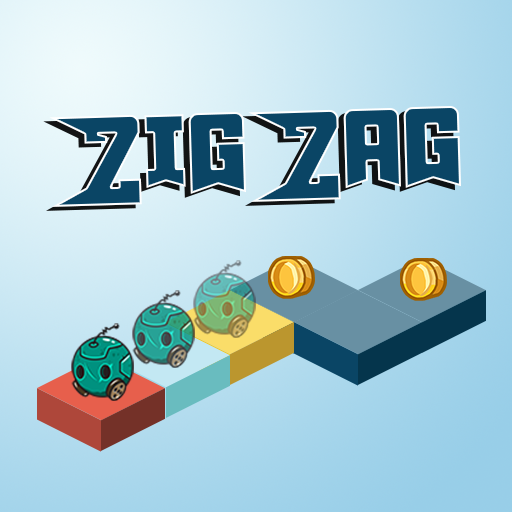
<style>
.page{position:relative;width:512px;height:512px}
.page>*{position:absolute;margin:0}
.t1{font:178.9px "Robus";color:#0a4565}
</style>
<div class="page">
<p class="t1" style="left:49px;top:106px;width:412px;height:101px;rotate:-2deg">ZigZag</p>
</div>
